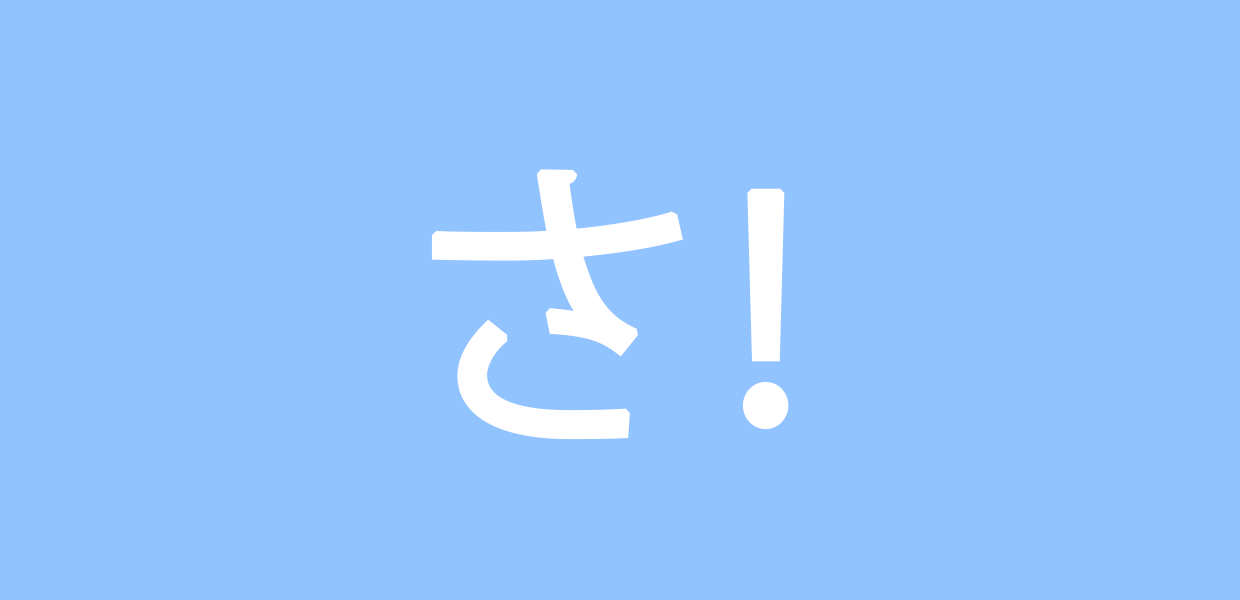
<style>
.page{position:relative;width:1240px;height:600px;background:#91c3ff}
.page>*{position:absolute;margin:0}
.t1{font:300px "KozGoPr6N-Regular";color:#ffffff;font-weight:bold}
</style>
<div class="page">
<p class="t1" style="left:431px;top:169px;width:358px;height:271px">さ！</p>
</div>
